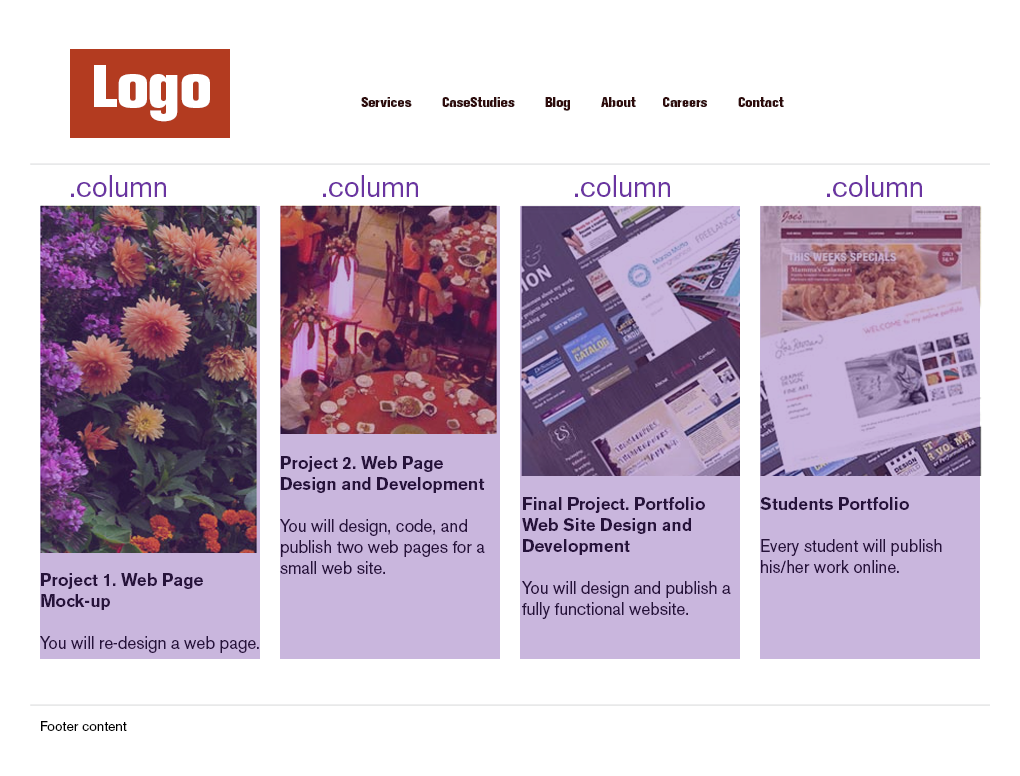
<style>
.page{position:relative;width:1020px;height:776px;background:#ffffff}
.page>*{position:absolute;margin:0}
.t1{font:60px "AkzidenzGroteskBE-XBd";color:#ffffff}
.t2{font:14px "AkzidenzGroteskBE-XBd";color:#2e0c0c}
.t3{font:30px "AkzidenzGroteskBE-Regular";color:#6a34a1}
.t4{font:17px/21px "AkzidenzGroteskBE-Regular";color:#26133a}
.t5{font:17px/21px "AkzidenzGroteskBE-Bold";color:#26133a}
.t6{font:14px "AkzidenzGroteskBE-Regular";color:#000000}
</style>
<div class="page">
<p class="t1" style="left:94px;top:65px;width:116px;height:57px">Logo</p>
<p class="t2" style="left:361px;top:97px;width:423px;height:14px">Services        CaseStudies        Blog        About       Careers        Contact</p>
<p class="t3" style="left:71px;top:175px;width:851px;height:22px">.column      .column     .column     .column</p>
<p class="t4" style="left:280px;top:456px;width:205px;height:118px"><span class="t5">Project 2. Web Page Design and Development   <br></span>You will design, code, and publish two web pages for a small web site.</p>
<p class="t5" style="left:522px;top:497px;width:209px;height:122px">Final Project. Portfolio Web Site Design and <br>Development<br><br><span class="t4">You will design and publish a fully functional website.</span></p>
<p class="t4" style="left:760px;top:497px;width:182px;height:76px"><span class="t5">Students Portfolio<br><br></span>Every student will publish his/her work online.</p>
<p class="t4" style="left:40px;top:573px;width:219px;height:80px"><span class="t5">Project 1. Web Page Mock-up</span> <br><br>You will re-design a web page.</p>
<p class="t6" style="left:41px;top:721px;width:86px;height:10px">Footer content</p>
</div>
